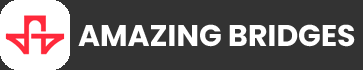
<style>
.page{position:relative;width:363px;height:70px;background:#333333}
.page>*{position:absolute;margin:0}
.t1{font:30px "Poppins-Bold";color:#ffffff}
</style>
<div class="page">
<p class="t1" style="left:78px;top:24px;width:277px;height:23px">AMAZING BRIDGES</p>
</div>
